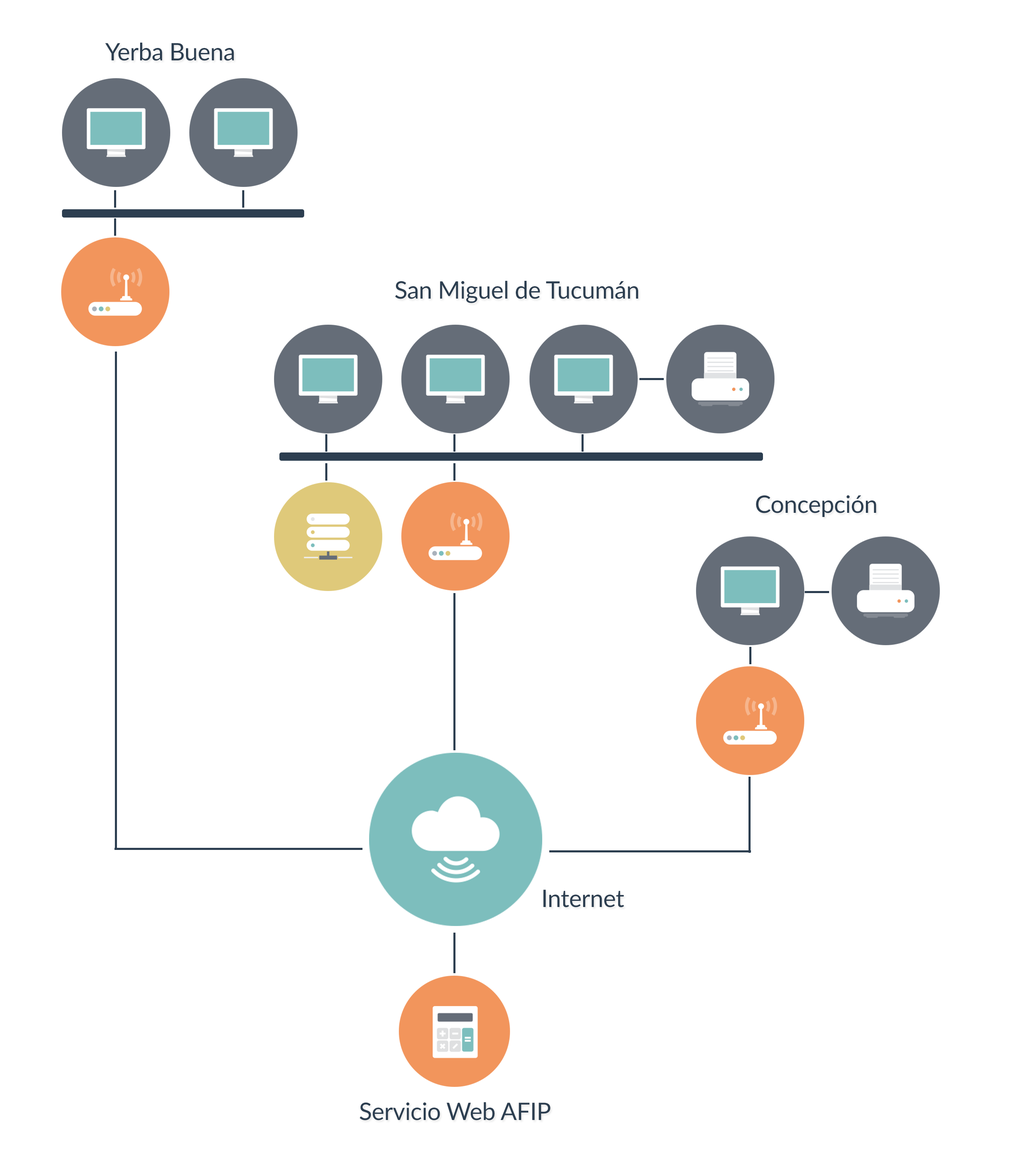
<style>
.page{position:relative;width:1025px;height:1163px;background:#ffffff}
.page>*{position:absolute;margin:0}
.t1{font:24.1px "Lato-Regular";letter-spacing:-0.01em;color:#2c3e50}
</style>
<div class="page">
<p class="t1" style="left:105px;top:43px;width:129px;height:18px">Yerba Buena</p>
<p class="t1" style="left:395px;top:281px;width:243px;height:22px">San Miguel de Tucumán</p>
<p class="t1" style="left:756px;top:495px;width:121px;height:22px">Concepción</p>
<p class="t1" style="left:543px;top:889px;width:81px;height:18px">Internet</p>
<p class="t1" style="left:360px;top:1102px;width:191px;height:18px">Servicio Web AFIP</p>
</div>
